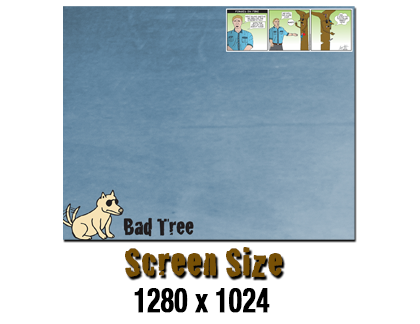
<style>
.page{position:relative;width:420px;height:324px;background:#ffffff}
.page>*{position:absolute;margin:0}
.t1{font:42.1px "Crackhouse";color:#775006;font-weight:bold}
.t2{font:34px "HelveticaNeue-CondensedBold";color:#000000;font-weight:bold;scale:0.79 1}
</style>
<div class="page">
<p class="t1" style="left:125px;top:247px;width:158px;height:30px">Screen Size</p>
<p class="t2" style="left:134px;top:288px;width:136px;height:25px">1280 x 1024</p>
</div>
